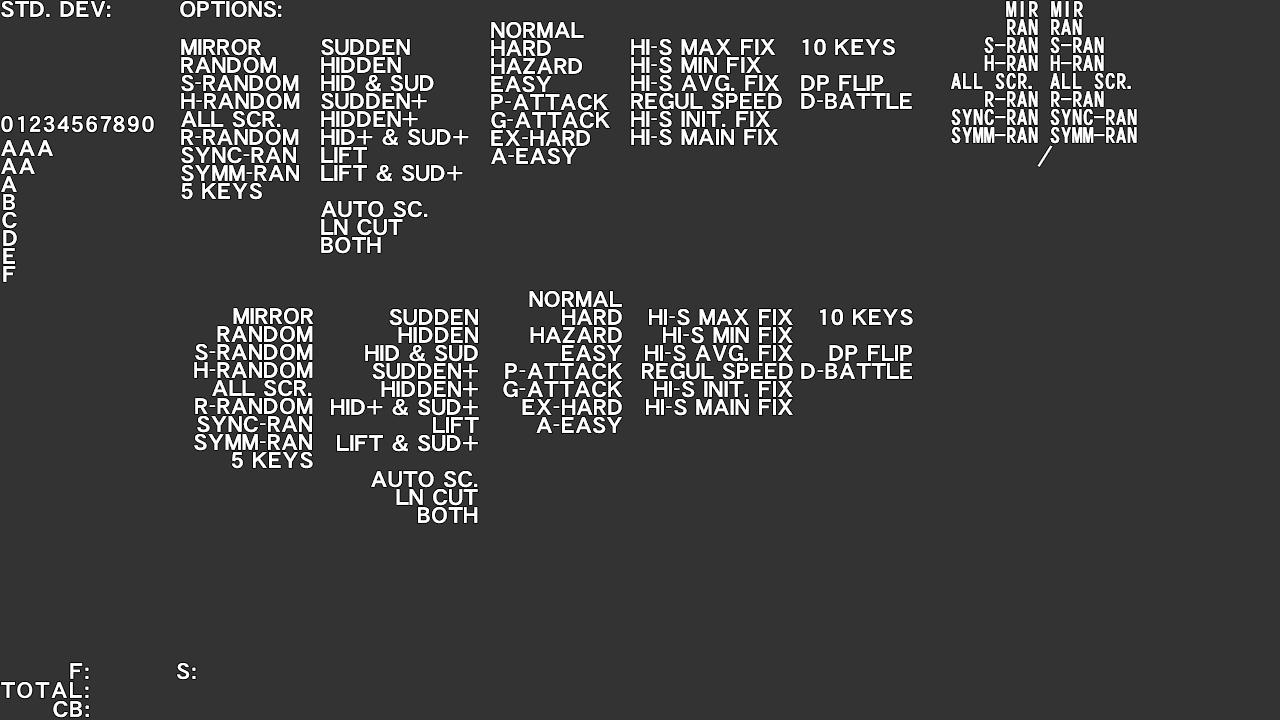
<style>
.page{position:relative;width:1280px;height:720px;background:#333333}
.page>*{position:absolute;margin:0}
.t1{font:22px "DFHSGothic-W7-WING-RKSJ-H";letter-spacing:0.05em;color:#ffffff}
.t2{font:22px "DFHSGothic-W7-WIN-RKSJ-H";color:#ffffff}
.t3{font:22px "DFHSGothic-W7-WING-RKSJ-H";letter-spacing:0.1em;color:#ffffff}
.t4{font:22px "DFHSGothicRPro6-W7";color:#ffffff}
</style>
<div class="page">
<p class="t1" style="left:1px;top:1px;width:110px;height:17px">STD. DEV:</p>
<p class="t1" style="left:180px;top:1px;width:102px;height:17px">OPTIONS:</p>
<p class="t2" style="left:1006px;top:1px;width:33px;height:16px">MIR</p>
<p class="t2" style="left:1051px;top:1px;width:33px;height:16px">MIR</p>
<p class="t1" style="left:491px;top:22px;width:93px;height:17px">NORMAL</p>
<p class="t2" style="left:1007px;top:19px;width:31px;height:16px">RAN</p>
<p class="t2" style="left:1051px;top:19px;width:31px;height:16px">RAN</p>
<p class="t1" style="left:181px;top:39px;width:80px;height:17px">MIRROR</p>
<p class="t1" style="left:321px;top:39px;width:89px;height:17px">SUDDEN</p>
<p class="t1" style="left:491px;top:40px;width:60px;height:16px">HARD</p>
<p class="t1" style="left:631px;top:39px;width:145px;height:17px">HI-S MAX FIX</p>
<p class="t1" style="left:802px;top:39px;width:93px;height:17px">10 KEYS</p>
<p class="t2" style="left:984px;top:37px;width:54px;height:17px">S-RAN</p>
<p class="t2" style="left:1050px;top:37px;width:54px;height:17px">S-RAN</p>
<p class="t1" style="left:181px;top:57px;width:95px;height:17px">RANDOM</p>
<p class="t1" style="left:321px;top:57px;width:80px;height:16px">HIDDEN</p>
<p class="t1" style="left:491px;top:58px;width:91px;height:16px">HAZARD</p>
<p class="t1" style="left:631px;top:57px;width:131px;height:17px">HI-S MIN FIX</p>
<p class="t2" style="left:984px;top:55px;width:54px;height:16px">H-RAN</p>
<p class="t2" style="left:1050px;top:55px;width:54px;height:16px">H-RAN</p>
<p class="t1" style="left:181px;top:75px;width:118px;height:17px">S-RANDOM</p>
<p class="t1" style="left:321px;top:75px;width:113px;height:17px">HID &amp; SUD</p>
<p class="t1" style="left:491px;top:76px;width:61px;height:17px">EASY</p>
<p class="t1" style="left:631px;top:75px;width:149px;height:17px">HI-S AVG. FIX</p>
<p class="t1" style="left:801px;top:75px;width:83px;height:16px">DP FLIP</p>
<p class="t2" style="left:951px;top:73px;width:81px;height:17px">ALL SCR.</p>
<p class="t2" style="left:1050px;top:73px;width:81px;height:17px">ALL SCR.</p>
<p class="t1" style="left:181px;top:93px;width:119px;height:17px">H-RANDOM</p>
<p class="t1" style="left:321px;top:93px;width:106px;height:17px">SUDDEN+</p>
<p class="t1" style="left:491px;top:94px;width:117px;height:17px">P-ATTACK</p>
<p class="t1" style="left:631px;top:93px;width:151px;height:17px">REGUL SPEED</p>
<p class="t1" style="left:801px;top:93px;width:111px;height:16px">D-BATTLE</p>
<p class="t2" style="left:985px;top:91px;width:53px;height:16px">R-RAN</p>
<p class="t2" style="left:1051px;top:91px;width:53px;height:16px">R-RAN</p>
<p class="t1" style="left:181px;top:111px;width:100px;height:17px">ALL SCR.</p>
<p class="t1" style="left:321px;top:111px;width:97px;height:16px">HIDDEN+</p>
<p class="t1" style="left:491px;top:112px;width:119px;height:17px">G-ATTACK</p>
<p class="t1" style="left:631px;top:111px;width:140px;height:17px">HI-S INIT. FIX</p>
<p class="t2" style="left:951px;top:109px;width:87px;height:17px">SYNC-RAN</p>
<p class="t2" style="left:1050px;top:109px;width:87px;height:17px">SYNC-RAN</p>
<p class="t1" style="left:181px;top:129px;width:118px;height:17px">R-RANDOM</p>
<p class="t1" style="left:321px;top:129px;width:148px;height:17px">HID+ &amp; SUD+</p>
<p class="t1" style="left:491px;top:130px;width:99px;height:16px">EX-HARD</p>
<p class="t1" style="left:631px;top:129px;width:148px;height:17px">HI-S MAIN FIX</p>
<p class="t2" style="left:951px;top:127px;width:87px;height:17px">SYMM-RAN</p>
<p class="t2" style="left:1050px;top:127px;width:87px;height:17px">SYMM-RAN</p>
<p class="t3" style="left:1px;top:140px;width:52px;height:16px">AAA</p>
<p class="t1" style="left:181px;top:147px;width:115px;height:17px">SYNC-RAN</p>
<p class="t1" style="left:321px;top:147px;width:46px;height:16px">LIFT</p>
<p class="t1" style="left:491px;top:148px;width:86px;height:17px">A-EASY</p>
<p class="t4" style="left:1037px;top:145px;width:16px;height:22px">/</p>
<p class="t3" style="left:1px;top:158px;width:34px;height:16px">AA</p>
<p class="t1" style="left:181px;top:165px;width:118px;height:17px">SYMM-RAN</p>
<p class="t1" style="left:321px;top:165px;width:142px;height:17px">LIFT &amp; SUD+</p>
<p class="t3" style="left:1px;top:176px;width:16px;height:16px">A</p>
<p class="t1" style="left:181px;top:183px;width:81px;height:17px">5 KEYS</p>
<p class="t3" style="left:3px;top:194px;width:12px;height:16px">B</p>
<p class="t1" style="left:321px;top:201px;width:107px;height:17px">AUTO SC.</p>
<p class="t3" style="left:2px;top:212px;width:15px;height:17px">C</p>
<p class="t1" style="left:321px;top:219px;width:82px;height:17px">LN CUT</p>
<p class="t3" style="left:3px;top:230px;width:14px;height:16px">D</p>
<p class="t1" style="left:321px;top:237px;width:60px;height:17px">BOTH</p>
<p class="t3" style="left:3px;top:248px;width:12px;height:16px">E</p>
<p class="t3" style="left:3px;top:266px;width:13px;height:16px">F</p>
<p class="t1" style="left:529px;top:291px;width:93px;height:17px">NORMAL</p>
<p class="t1" style="left:233px;top:308px;width:81px;height:17px">MIRROR</p>
<p class="t1" style="left:389px;top:309px;width:89px;height:17px">SUDDEN</p>
<p class="t1" style="left:562px;top:309px;width:60px;height:16px">HARD</p>
<p class="t1" style="left:649px;top:309px;width:144px;height:17px">HI-S MAX FIX</p>
<p class="t1" style="left:820px;top:309px;width:93px;height:17px">10 KEYS</p>
<p class="t1" style="left:217px;top:326px;width:96px;height:17px">RANDOM</p>
<p class="t1" style="left:398px;top:327px;width:80px;height:16px">HIDDEN</p>
<p class="t1" style="left:530px;top:327px;width:92px;height:16px">HAZARD</p>
<p class="t1" style="left:663px;top:327px;width:130px;height:17px">HI-S MIN FIX</p>
<p class="t1" style="left:195px;top:344px;width:118px;height:17px">S-RANDOM</p>
<p class="t1" style="left:365px;top:345px;width:113px;height:17px">HID &amp; SUD</p>
<p class="t1" style="left:562px;top:345px;width:60px;height:17px">EASY</p>
<p class="t1" style="left:645px;top:345px;width:148px;height:17px">HI-S AVG. FIX</p>
<p class="t1" style="left:829px;top:345px;width:83px;height:16px">DP FLIP</p>
<p class="t1" style="left:194px;top:362px;width:119px;height:17px">H-RANDOM</p>
<p class="t1" style="left:372px;top:363px;width:106px;height:17px">SUDDEN+</p>
<p class="t1" style="left:505px;top:363px;width:118px;height:17px">P-ATTACK</p>
<p class="t1" style="left:642px;top:363px;width:151px;height:17px">REGUL SPEED</p>
<p class="t1" style="left:801px;top:363px;width:111px;height:16px">D-BATTLE</p>
<p class="t1" style="left:212px;top:380px;width:100px;height:17px">ALL SCR.</p>
<p class="t1" style="left:381px;top:381px;width:97px;height:16px">HIDDEN+</p>
<p class="t1" style="left:503px;top:381px;width:120px;height:17px">G-ATTACK</p>
<p class="t1" style="left:654px;top:381px;width:139px;height:17px">HI-S INIT. FIX</p>
<p class="t1" style="left:195px;top:398px;width:118px;height:17px">R-RANDOM</p>
<p class="t1" style="left:331px;top:399px;width:147px;height:17px">HID+ &amp; SUD+</p>
<p class="t1" style="left:522px;top:399px;width:100px;height:16px">EX-HARD</p>
<p class="t1" style="left:646px;top:399px;width:147px;height:17px">HI-S MAIN FIX</p>
<p class="t1" style="left:197px;top:416px;width:115px;height:17px">SYNC-RAN</p>
<p class="t1" style="left:433px;top:417px;width:46px;height:16px">LIFT</p>
<p class="t1" style="left:536px;top:417px;width:86px;height:17px">A-EASY</p>
<p class="t1" style="left:194px;top:434px;width:118px;height:17px">SYMM-RAN</p>
<p class="t1" style="left:337px;top:435px;width:141px;height:17px">LIFT &amp; SUD+</p>
<p class="t1" style="left:232px;top:452px;width:81px;height:17px">5 KEYS</p>
<p class="t1" style="left:371px;top:471px;width:107px;height:17px">AUTO SC.</p>
<p class="t1" style="left:396px;top:489px;width:82px;height:17px">LN CUT</p>
<p class="t1" style="left:418px;top:507px;width:60px;height:17px">BOTH</p>
<p class="t3" style="left:53px;top:701px;width:36px;height:17px">CB:</p>
</div>
